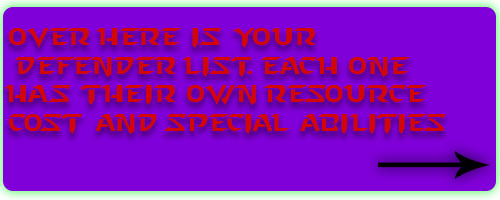
<style>
.page{position:relative;width:500px;height:200px;background:#8000d9}
.page>*{position:absolute;margin:0}
.t1{font:24px "StarcraftNormal";color:#d20606}
</style>
<div class="page">
<p class="t1" style="left:5px;top:28px;width:441px;height:106px">Over here is your<br> defender list. Each one has their own resource cost and special abilities</p>
</div>
